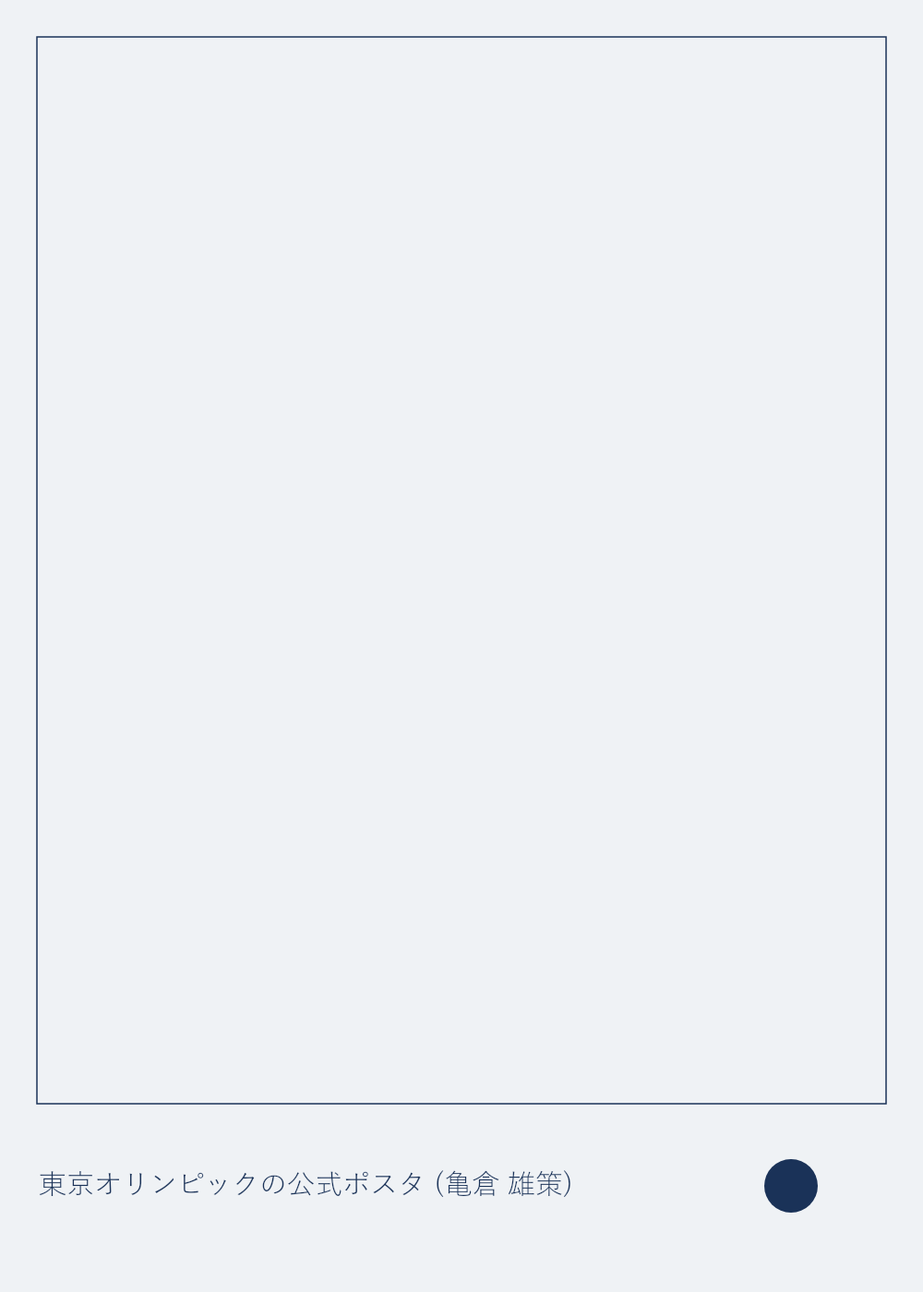
<style>
.page{position:relative;width:923px;height:1292px;background:#eff2f5}
.page>*{position:absolute;margin:0}
.t1{font:27.7px "YuGothic-Bold";color:#1a3258}
</style>
<div class="page">
<p class="t1" style="left:39px;top:1174px;width:536px;height:35px">東京オリンピックの公式ポスタ (亀倉 雄策)</p>
</div>
